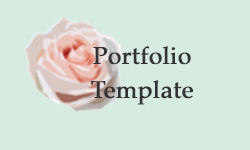
<style>
.page{position:relative;width:250px;height:150px;background:#d7ebe1}
.page>*{position:absolute;margin:0}
.t1{font:24px/34px "Palatino-Roman";color:#333333;font-weight:bold}
</style>
<div class="page">
<p class="t1" style="left:91px;top:46px;width:102px;height:59px;text-align:center">Portfolio<br>Template</p>
</div>
